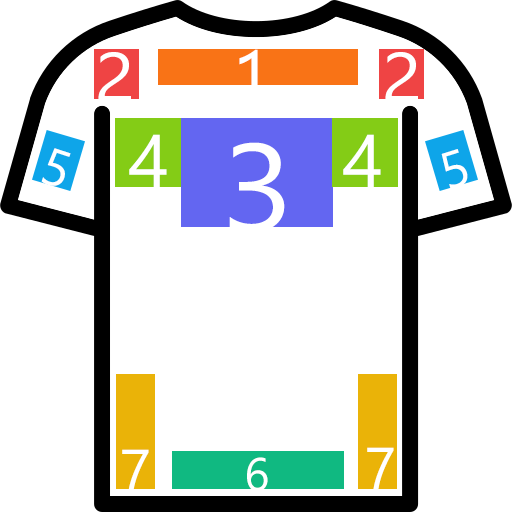
<style>
.page{position:relative;width:512px;height:512px;background:#ffffff}
.page>*{position:absolute;margin:0}
.t1{font:68.9px "SegoeUISymbol";color:#ffffff;scale:1.08 1}
.t2{font:74.7px "SegoeUISymbol";color:#ffffff}
.t3{font:51.7px "SegoeUISymbol";color:#ffffff}
.t4{font:123.4px "SegoeUISymbol";color:#ffffff;scale:1.08 1}
.t5{font:59px "SegoeUISymbol";color:#ffffff}
.t6{font:46.5px "SegoeUISymbol";color:#ffffff}
</style>
<div class="page">
<p class="t1" style="left:98px;top:52px;width:33px;height:49px">2</p>
<p class="t2" style="left:239px;top:49px;width:19px;height:54px">1</p>
<p class="t1" style="left:385px;top:52px;width:33px;height:49px">2</p>
<p class="t2" style="left:129px;top:134px;width:38px;height:53px">4</p>
<p class="t2" style="left:343px;top:134px;width:38px;height:53px">4</p>
<p class="t3" style="left:41px;top:148px;width:30px;height:38px;rotate:18deg">5</p>
<p class="t4" style="left:229px;top:142px;width:56px;height:91px">3</p>
<p class="t3" style="left:441px;top:149px;width:27px;height:40px;rotate:-17deg">5</p>
<p class="t5" style="left:122px;top:449px;width:27px;height:42px">7</p>
<p class="t5" style="left:367px;top:447px;width:27px;height:42px">7</p>
<p class="t6" style="left:247px;top:457px;width:21px;height:34px">6</p>
</div>
